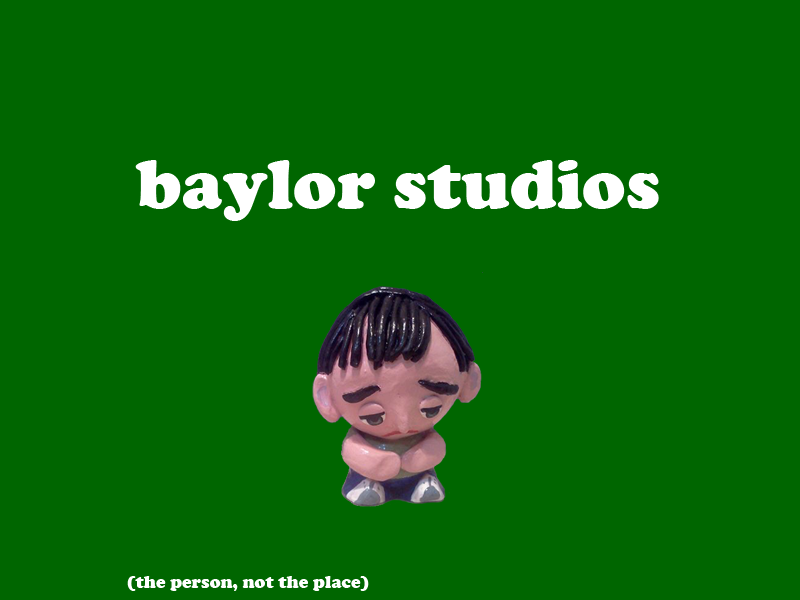
<style>
.page{position:relative;width:800px;height:600px;background:#006600}
.page>*{position:absolute;margin:0}
.t1{font:72px "CooperBlack";color:#ffffff}
.t2{font:18px "CooperBlack";color:#ffffff}
</style>
<div class="page">
<p class="t1" style="left:135px;top:160px;width:524px;height:61px">baylor studios</p>
<p class="t2" style="left:127px;top:576px;width:242px;height:15px">(the person, not the place)</p>
</div>
